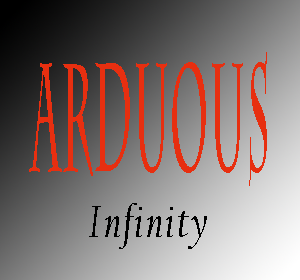
<style>
.page{position:relative;width:300px;height:280px}
.page>*{position:absolute;margin:0}
.t1{font:152.5px "CharlemagneStd-Bold";letter-spacing:0.04em;color:#e72f10;scale:0.27 1}
.t2{font:46.3px "CalifornianFB-Italic";letter-spacing:0.04em;color:#000000;scale:0.88 1}
</style>
<div class="page">
<p class="t1" style="left:29px;top:52px;width:238px;height:134px">Arduous</p>
<p class="t2" style="left:89px;top:203px;width:118px;height:46px">Infinity</p>
</div>
